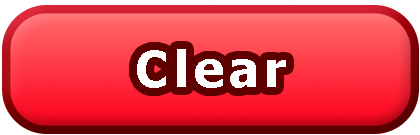
<style>
.page{position:relative;width:420px;height:135px}
.page>*{position:absolute;margin:0}
.t1{font:50px "Tahoma-Bold";letter-spacing:0.1em;color:#ffffff}
</style>
<div class="page">
<p class="t1" style="left:137px;top:49px;width:149px;height:39px">Clear</p>
</div>
